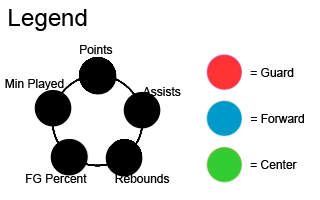
<style>
.page{position:relative;width:320px;height:200px;background:#ffffff}
.page>*{position:absolute;margin:0}
.t1{font:24px "ArialMT";color:#000000}
.t2{font:12px "ArialMT";color:#000000}
</style>
<div class="page">
<p class="t1" style="left:9px;top:9px;width:78px;height:22px">Legend</p>
<p class="t2" style="left:80px;top:45px;width:33px;height:9px">Points</p>
<p class="t2" style="left:250px;top:68px;width:44px;height:9px">= Guard</p>
<p class="t2" style="left:5px;top:79px;width:59px;height:11px">Min Played</p>
<p class="t2" style="left:142px;top:87px;width:39px;height:9px">Assists</p>
<p class="t2" style="left:251px;top:114px;width:53px;height:9px">= Forward</p>
<p class="t2" style="left:250px;top:160px;width:47px;height:9px">= Center</p>
<p class="t2" style="left:26px;top:174px;width:61px;height:9px">FG Percent</p>
<p class="t2" style="left:115px;top:174px;width:55px;height:9px">Rebounds</p>
</div>
